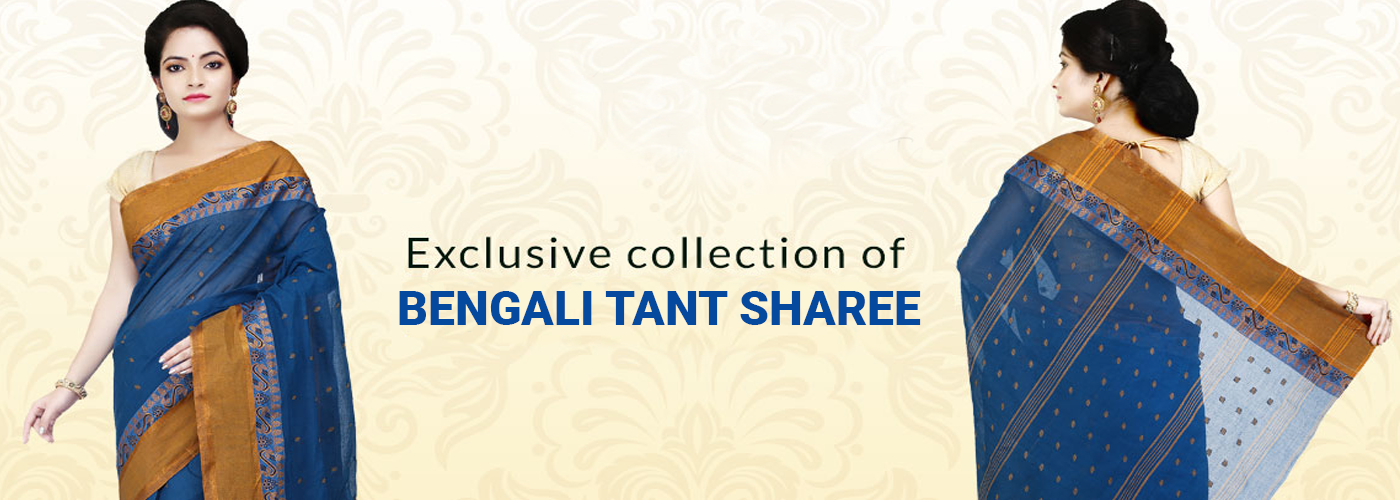
<style>
.page{position:relative;width:1400px;height:500px}
.page>*{position:absolute;margin:0}
.t1{font:48px "Roboto-Black";color:#04499e}
</style>
<div class="page">
<p class="t1" style="left:399px;top:291px;width:522px;height:34px">BENGALI TANT SHAREE</p>
</div>
